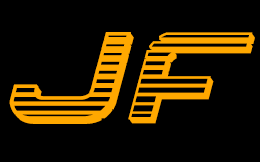
<style>
.page{position:relative;width:260px;height:162px;background:#000000}
.page>*{position:absolute;margin:0}
.t1{font:180px "4114BlasterChromeItalic";color:#ffa800;font-weight:bold}
</style>
<div class="page">
<p class="t1" style="left:9px;top:32px;width:246px;height:92px">jf</p>
</div>
